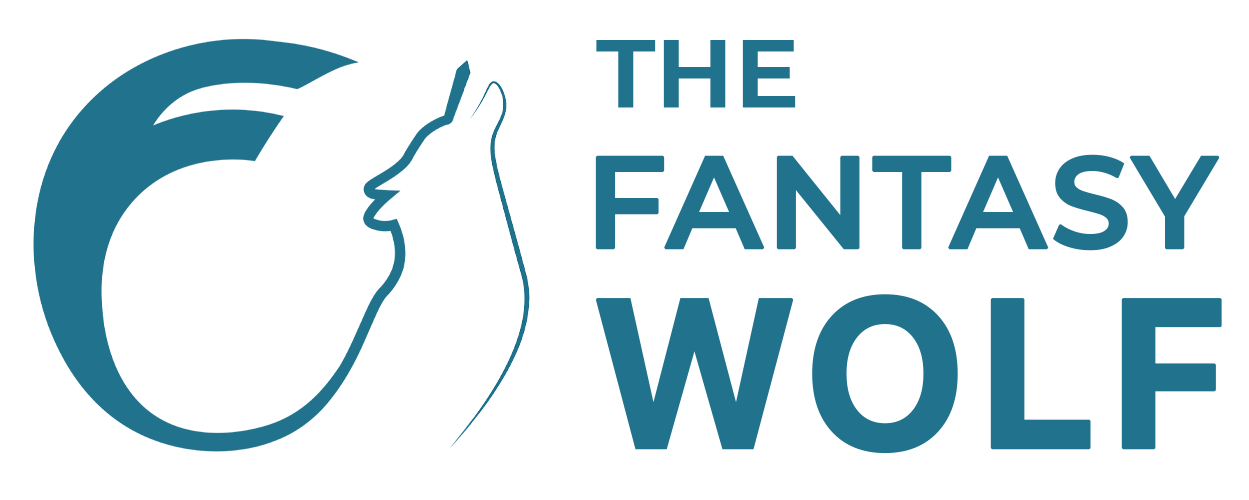
<style>
.page{position:relative;width:1249px;height:500px;background:#ffffff}
.page>*{position:absolute;margin:0}
.t1{font:94.4px "Montserrat-SemiBold";color:#20728d;font-weight:bold}
.t2{font:128.7px "Montserrat-SemiBold";color:#20728d;font-weight:bold}
.t3{font:211.4px "SFProText-Bold";color:#20728d;font-weight:bold}
</style>
<div class="page">
<p class="t1" style="left:596px;top:40px;width:200px;height:68px">THE</p>
<p class="t2" style="left:595px;top:154px;width:625px;height:97px">FANTASY</p>
<p class="t3" style="left:595px;top:294px;width:627px;height:160px">WOLF</p>
</div>
